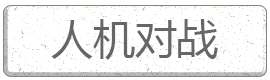
<style>
.page{position:relative;width:270px;height:80px;background:#ffffff}
.page>*{position:absolute;margin:0}
.t1{font:41.7px "MicrosoftYaHei";color:#666666}
</style>
<div class="page">
<p class="t1" style="left:51px;top:19px;width:167px;height:41px">人机对战</p>
</div>
